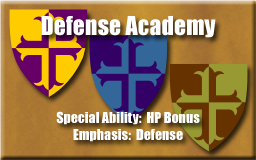
<style>
.page{position:relative;width:256px;height:160px}
.page>*{position:absolute;margin:0}
.t1{font:24px "Impact";color:#ffffff}
.t2{font:14px "Impact";color:#ffffff}
</style>
<div class="page">
<p class="t1" style="left:41px;top:16px;width:175px;height:22px">Defense Academy</p>
<p class="t2" style="left:56px;top:111px;width:144px;height:14px">Special Ability:  HP Bonus</p>
<p class="t2" style="left:73px;top:129px;width:110px;height:13px">Emphasis:  Defense</p>
</div>
